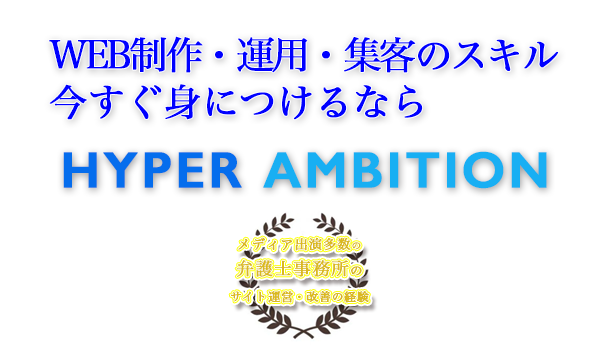
<style>
.page{position:relative;width:600px;height:350px;background:#ffffff}
.page>*{position:absolute;margin:0}
.t1{font:38px/47px "HiraMinPro-W3";letter-spacing:-0.09em;color:#0000ff;font-weight:bold}
.t2{font:38px/47px "HiraMinPro-W3";letter-spacing:-0.03em;color:#0000ff;font-weight:bold}
.t3{font:51px "GillSans-SemiBold";letter-spacing:0.05em;color:#18aff3;font-weight:bold}
.t4{font:51px "GillSans-SemiBold";letter-spacing:0.05em;color:#056ded;font-weight:bold}
.t5{font:11.7px "HiraMinPro-W3";letter-spacing:0.05em;color:#dab91f;font-weight:bold}
.t6{font:13.2px "HiraMinPro-W3";letter-spacing:0.05em;color:#dab91f;font-weight:bold}
.t7{font:9.5px "HiraMinPro-W3";letter-spacing:0.05em;color:#dab91f;font-weight:bold}
.t8{font:17.5px "HiraMinPro-W3";letter-spacing:0.05em;color:#dab91f;font-weight:bold}
.t9{font:12.4px "HiraMinPro-W3";letter-spacing:0.05em;color:#dab91f;font-weight:bold}
</style>
<div class="page">
<p class="t1" style="left:49px;top:36px;width:510px;height:84px">WEB制作・運用・集客のスキル<br><span class="t2">今すぐ身につけるなら</span></p>
<p class="t3" style="left:63px;top:151px;width:484px;height:38px"><span class="t4">HYPER </span>AMBITION</p>
<p class="t5" style="left:230px;top:237px;width:139px;height:66px;text-align:center"><span class="t6">メディア出演多数</span><span class="t7">の<br></span><span class="t8">弁護士事務所</span><span class="t9">の<br></span>サイト運営・改善の経験</p>
</div>
